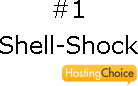
<style>
.page{position:relative;width:138px;height:86px;background:#ffffff}
.page>*{position:absolute;margin:0}
.t1{font:24px/36px "Verdana";color:#000000}
.t2{font:11.3px "Futura-Medium";color:#ffffff}
.t3{font:11.3px "Futura-Medium";color:#333333}
</style>
<div class="page">
<p class="t1" style="left:0px;top:0px;width:138px;height:54px;text-align:center">#1<br>Shell-Shock</p>
<p class="t2" style="left:66px;top:67px;width:68px;height:13px">Hosting<span class="t3">Choice</span></p>
</div>
